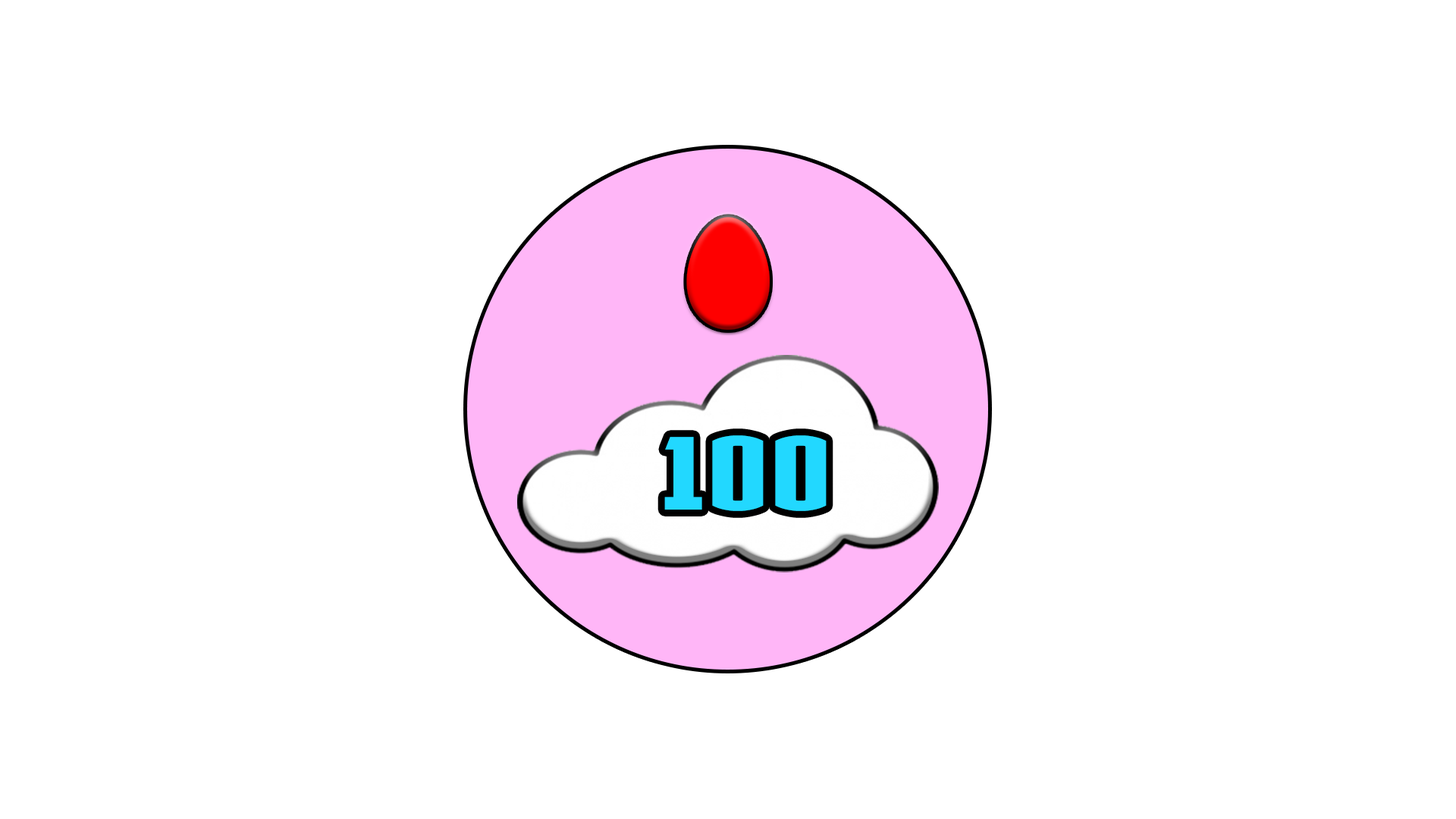
<style>
.page{position:relative;width:1456px;height:819px;background:#ffffff}
.page>*{position:absolute;margin:0}
.t1{font:99.8px "IRONMANOFWAR002NCV";letter-spacing:0.01em;color:#22d8ff;scale:1.41 1}
</style>
<div class="page">
<p class="t1" style="left:664px;top:435px;width:163px;height:76px">100</p>
</div>
